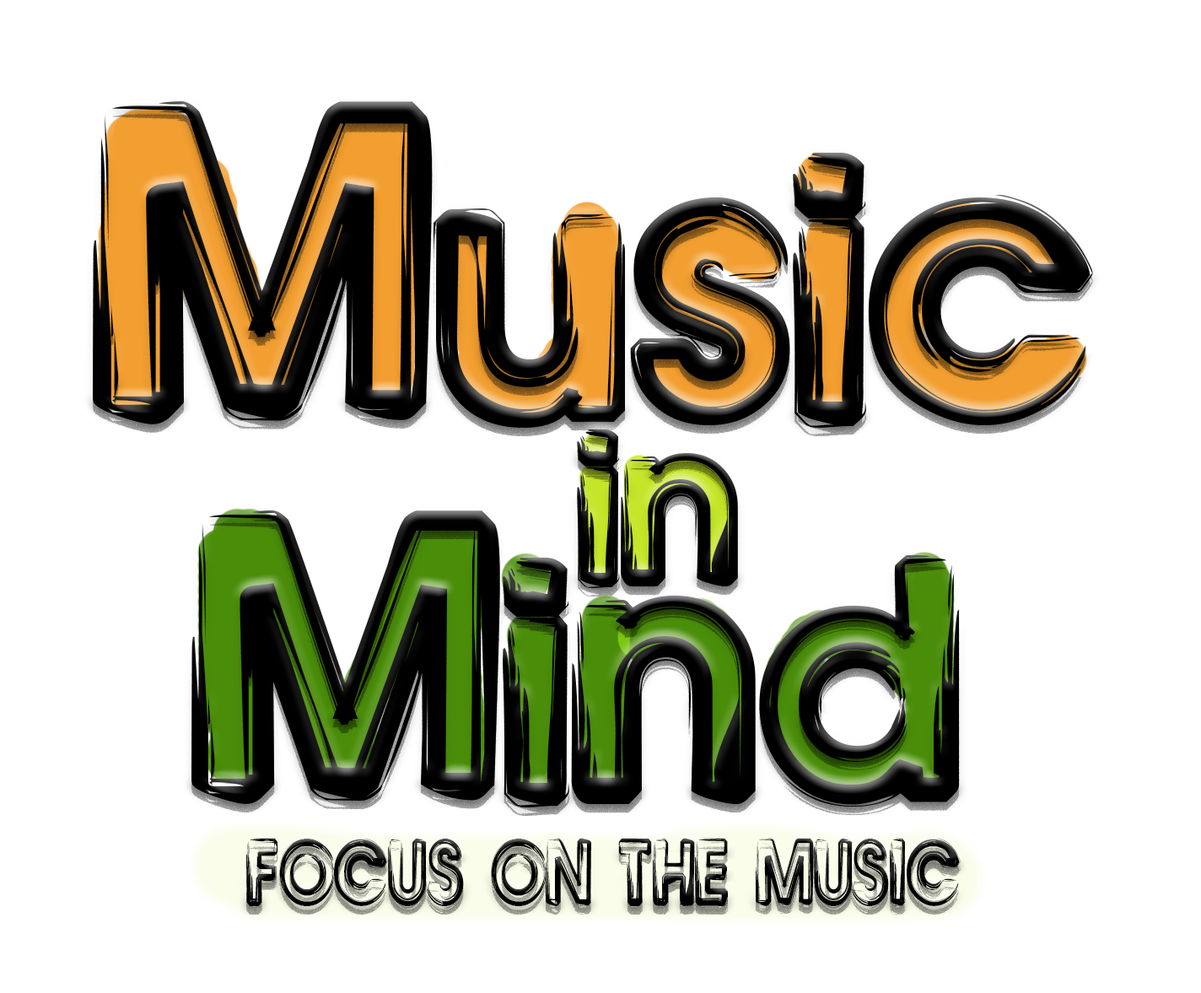
<style>
.page{position:relative;width:1201px;height:993px;background:#ffffff}
.page>*{position:absolute;margin:0}
.t1{font:322.8px "BennyBlanco";color:#000000}
.t2{font:186.7px "BennyBlanco";color:#000000}
.t3{font:293.5px "BennyBlanco";color:#000000}
.t4{font:67.7px "BennyBlanco";color:#000000;scale:0.81 1}
</style>
<div class="page">
<p class="t1" style="left:93px;top:101px;width:1000px;height:327px">Music</p>
<p class="t2" style="left:577px;top:429px;width:161px;height:159px">in</p>
<p class="t3" style="left:191px;top:509px;width:769px;height:298px">Mind</p>
<p class="t4" style="left:246px;top:838px;width:715px;height:68px">FOCUS ON THE MUSIC</p>
</div>
